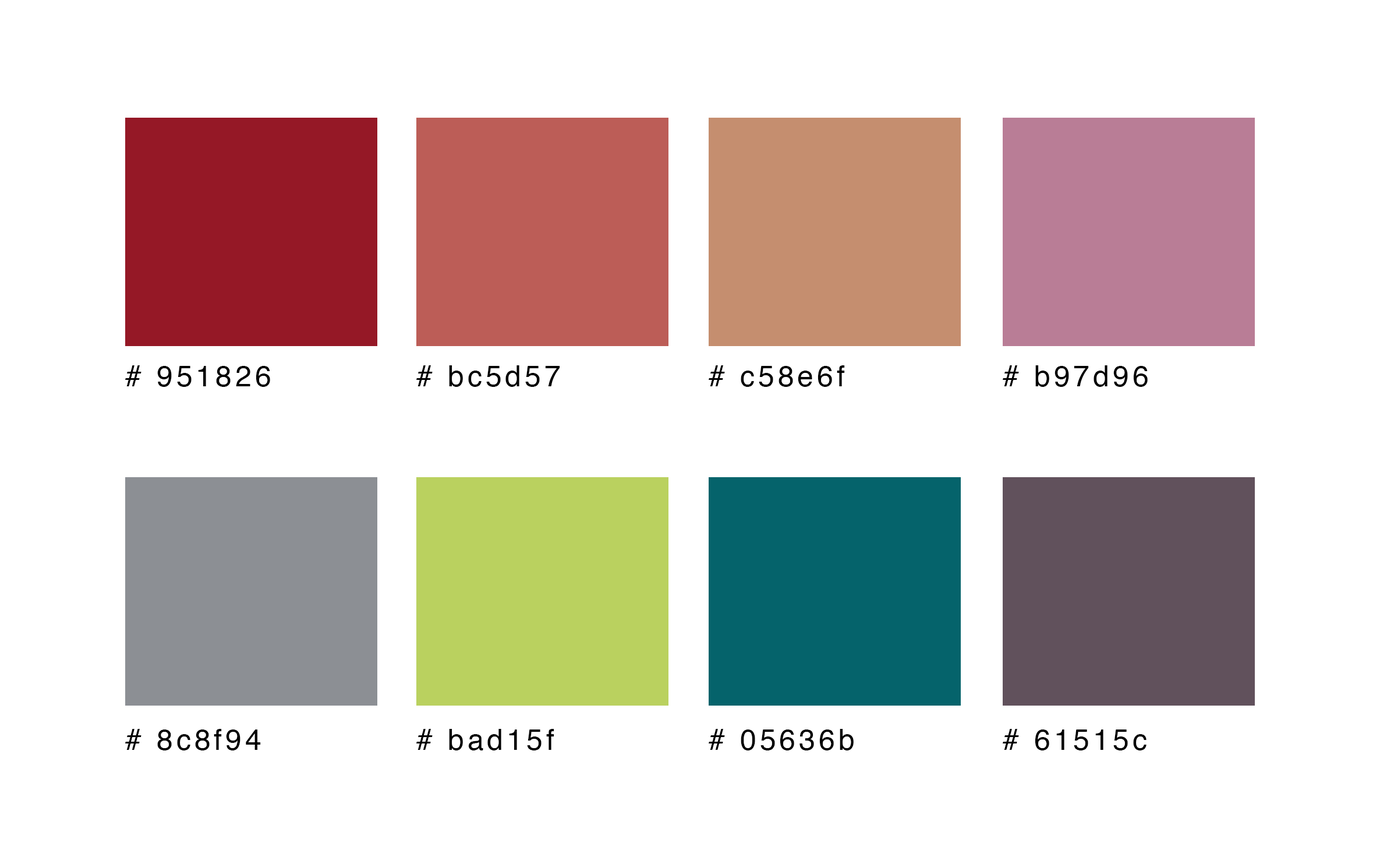
<style>
.page{position:relative;width:1387px;height:860px;background:#ffffff}
.page>*{position:absolute;margin:0}
.t1{font:29.1px "Helvetica";letter-spacing:0.12em;color:#000000}
</style>
<div class="page">
<p class="t1" style="left:125px;top:365px;width:145px;height:22px"># 951826</p>
<p class="t1" style="left:416px;top:365px;width:144px;height:22px"># bc5d57</p>
<p class="t1" style="left:709px;top:365px;width:136px;height:22px"># c58e6f</p>
<p class="t1" style="left:1003px;top:365px;width:145px;height:22px"># b97d96</p>
<p class="t1" style="left:125px;top:729px;width:136px;height:21px"># 8c8f94</p>
<p class="t1" style="left:416px;top:729px;width:138px;height:21px"># bad15f</p>
<p class="t1" style="left:709px;top:729px;width:145px;height:21px"># 05636b</p>
<p class="t1" style="left:1003px;top:729px;width:144px;height:21px"># 61515c</p>
</div>
